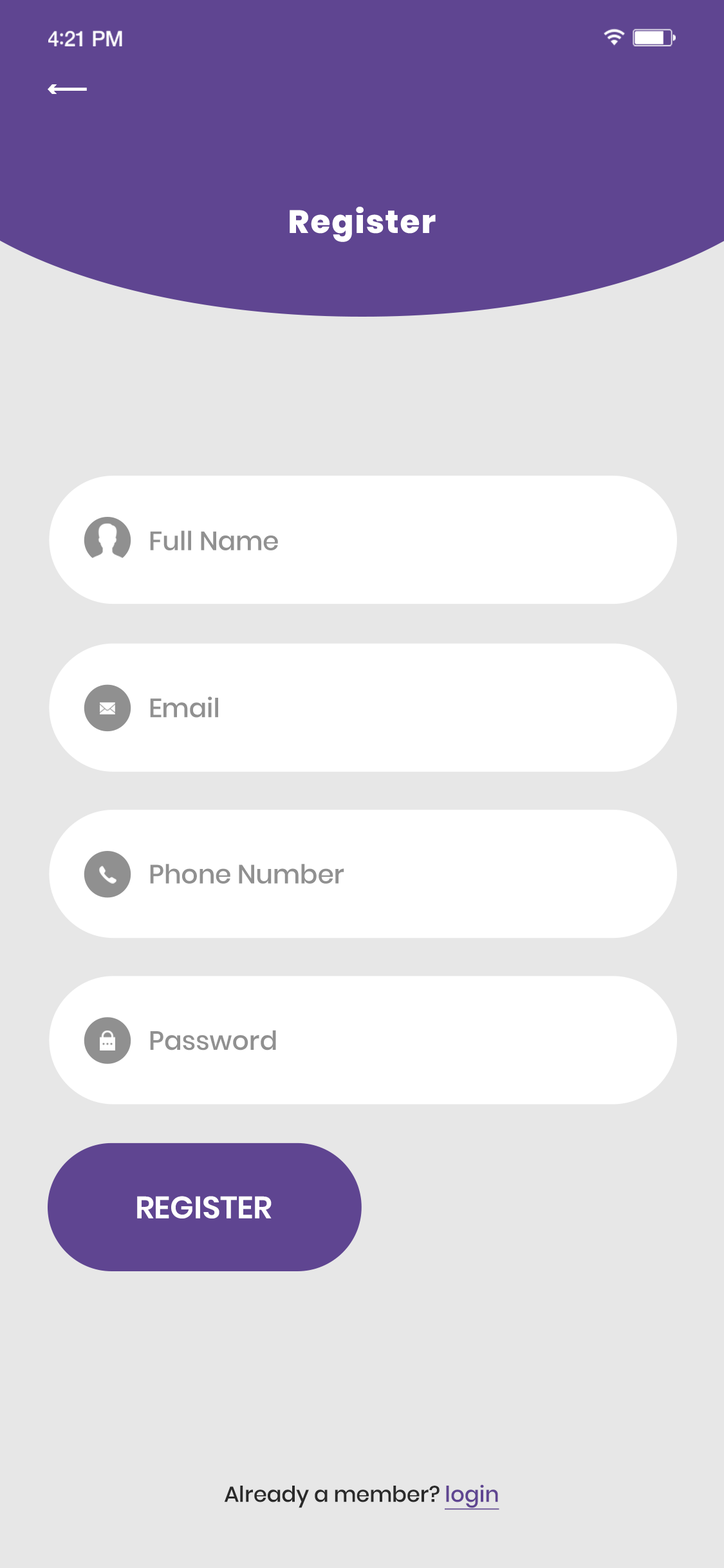
<style>
.page{position:relative;width:724px;height:1568px;background:#e7e7e7}
.page>*{position:absolute;margin:0}
.t1{font:21.9px "Poppins-Bold";letter-spacing:-0.245em;color:#ffffff}
.t2{font:32.2px "Poppins-ExtraBold";letter-spacing:0.04em;color:#ffffff}
.t3{font:26.4px "Poppins-Medium";letter-spacing:-0.005em;color:#909090}
.t4{font:30.9px "Poppins-SemiBold";letter-spacing:-0.005em;color:#ffffff}
.t5{font:21.9px "Poppins-Medium";letter-spacing:-0.005em;color:#2a2a2a}
.t6{font:21.9px "Poppins-Medium";letter-spacing:-0.005em;color:#5f4591;text-decoration:underline}
</style>
<div class="page">
<p class="t1" style="left:48px;top:84px;width:39px;height:10px">&lt;-----</p>
<p class="t2" style="left:290px;top:207px;width:146px;height:35px">Register</p>
<p class="t3" style="left:150px;top:530px;width:128px;height:20px">Full Name</p>
<p class="t3" style="left:150px;top:696px;width:68px;height:22px">Email</p>
<p class="t3" style="left:150px;top:864px;width:194px;height:20px">Phone Number</p>
<p class="t3" style="left:150px;top:1030px;width:126px;height:20px">Password</p>
<p class="t4" style="left:137px;top:1196px;width:135px;height:22px">REGISTER</p>
<p class="t5" style="left:224px;top:1484px;width:275px;height:26px">Already a member? <span class="t6">login</span></p>
</div>
